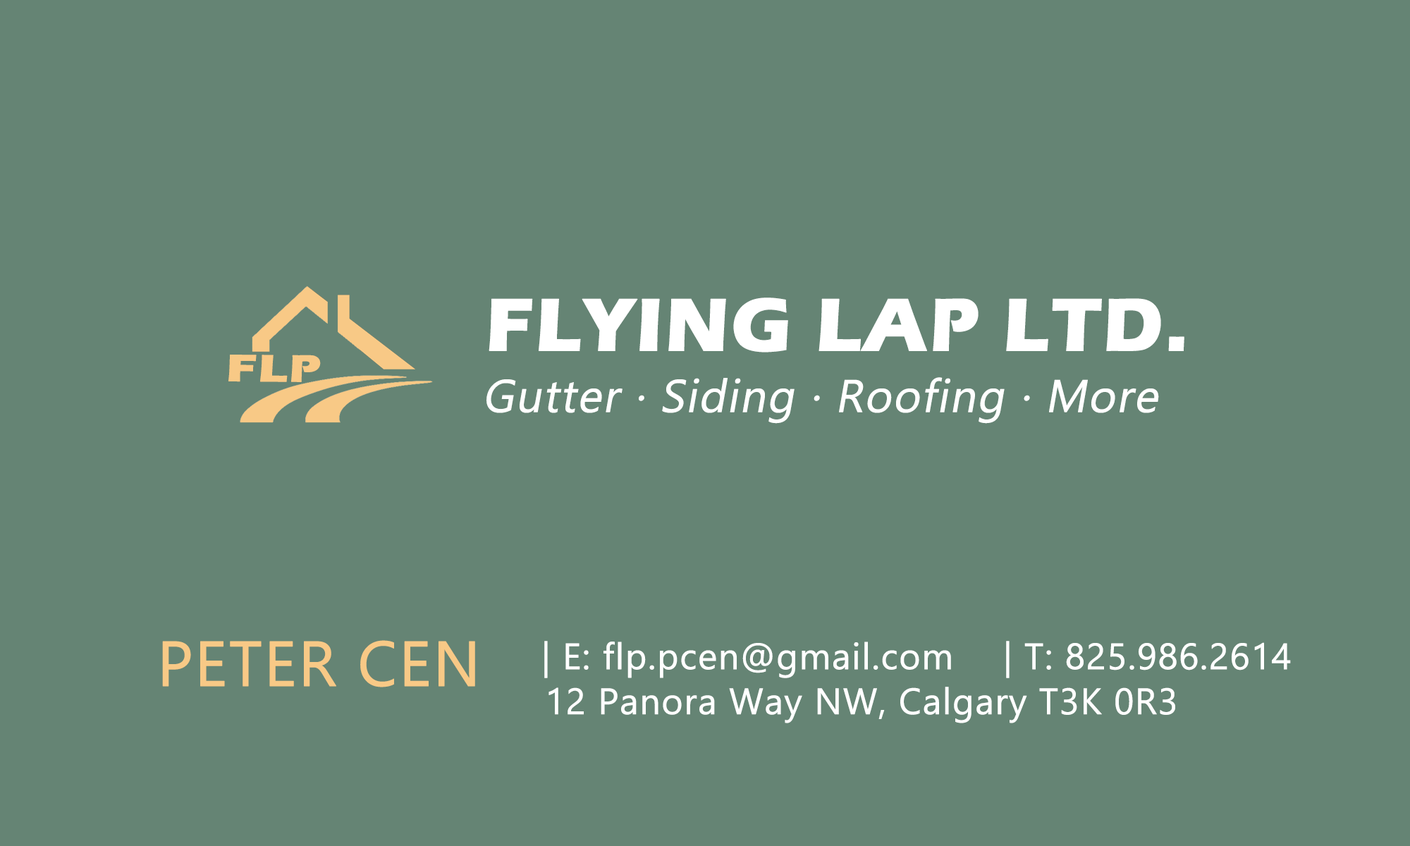
<style>
.page{position:relative;width:1410px;height:846px;background:#658474}
.page>*{position:absolute;margin:0}
.t1{font:77.5px "ErasITC-Bold";letter-spacing:0.005em;color:#ffffff;font-weight:bold}
.t2{font:39.3px "ErasITC-Bold";letter-spacing:0.005em;color:#f8c986;font-weight:bold;scale:1.26 1}
.t3{font:45.8px "Ebrima";letter-spacing:0.005em;color:#ffffff;font-weight:bold;font-style:italic}
.t4{font:63.4px "Ebrima";letter-spacing:0.005em;color:#f8c986;font-weight:bold}
.t5{font:36.7px "Ebrima";letter-spacing:0.005em;color:#ffffff;font-weight:bold}
</style>
<div class="page">
<p class="t1" style="left:488px;top:297px;width:696px;height:55px">FLYING LAP LTD.</p>
<p class="t2" style="left:228px;top:355px;width:93px;height:27px;rotate:1deg">FLP</p>
<p class="t3" style="left:486px;top:377px;width:673px;height:47px">Gutter ∙ Siding ∙ Roofing ∙ More</p>
<p class="t4" style="left:162px;top:640px;width:313px;height:47px">PETER CEN</p>
<p class="t5" style="left:544px;top:641px;width:747px;height:37px">| E: flp.pcen@gmail.com   | T: 825.986.2614</p>
<p class="t5" style="left:548px;top:687px;width:627px;height:36px">12 Panora Way NW, Calgary T3K 0R3</p>
</div>
